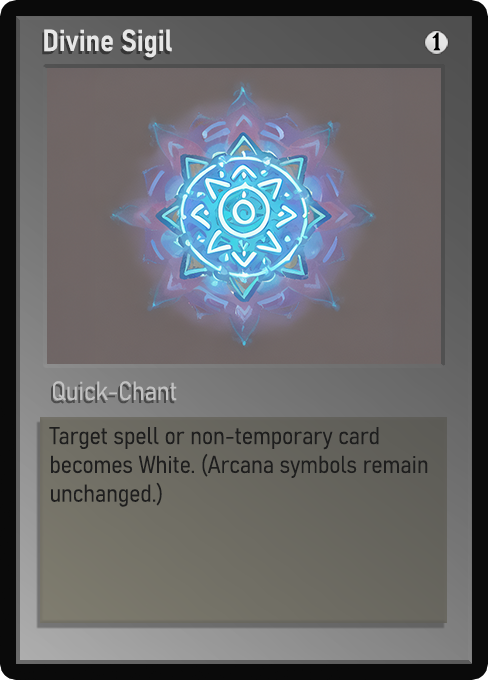
<style>
.page{position:relative;width:488px;height:680px}
.page>*{position:absolute;margin:0}
.t1{font:30px "Bahnschrift-SemiBoldSemiCondensed";color:#f2f2f2;font-weight:bold}
.t2{font:25px "WTRRoycroft";color:#000000;font-weight:bold;scale:1.09 1}
.t3{font:26px "Bahnschrift-LightSemiCondensed";color:#c8c8c8;font-weight:bold}
.t4{font:24px "Bahnschrift-LightSemiCondensed";color:#1e1e1e;font-weight:bold}
</style>
<div class="page">
<p class="t1" style="left:44px;top:29px;width:128px;height:29px;opacity:0.9">Divine Sigil</p>
<p class="t2" style="left:432px;top:32px;width:9px;height:19px">1</p>
<p class="t3" style="left:53px;top:381px;width:124px;height:20px;opacity:0.9">Quick-Chant</p>
<p class="t4" style="left:49px;top:427px;width:379px;height:80px">Target spell or non-temporary card becomes White. (Arcana symbols remain unchanged.)</p>
</div>
